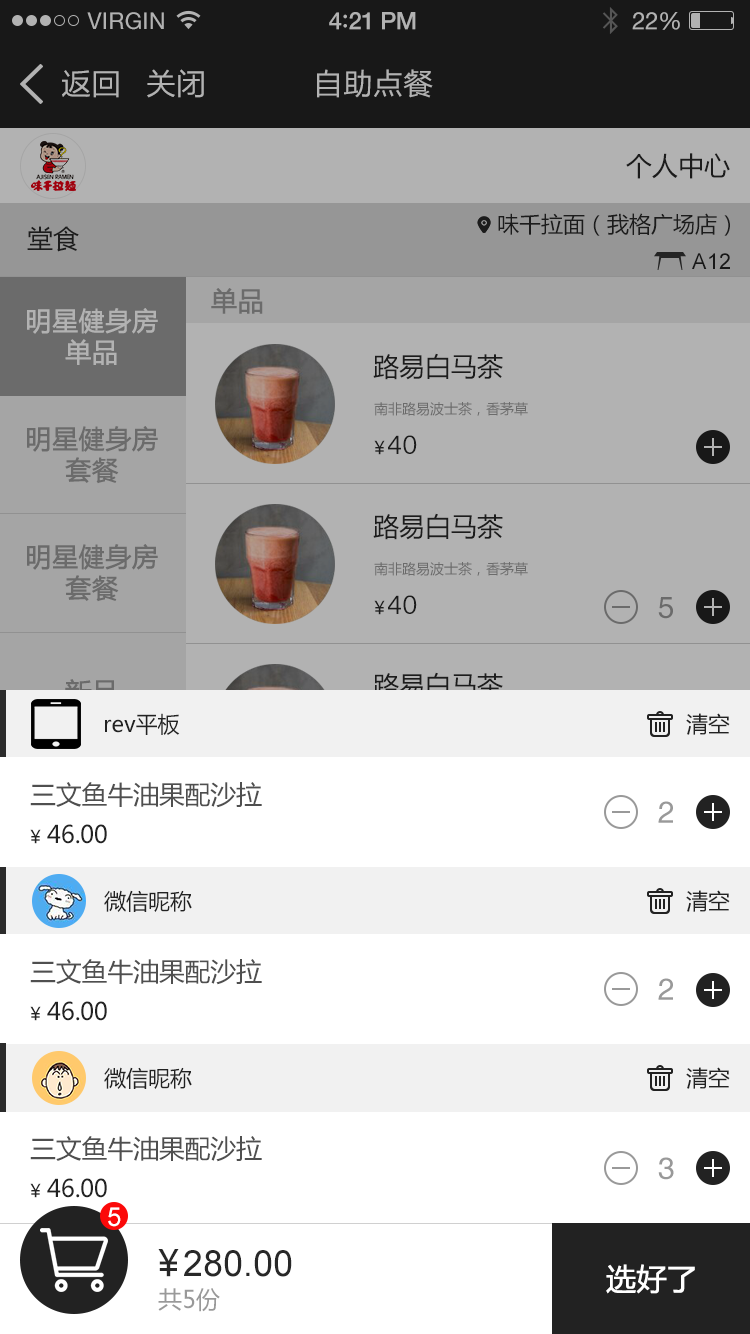
<style>
.page{position:relative;width:750px;height:1334px;background:#ffffff}
.page>*{position:absolute;margin:0}
.t1{font:23px "HelveticaNeue";letter-spacing:0.02em;color:#b2b2b2}
.t2{font:24px "HelveticaNeue-Medium";letter-spacing:-0.02em;color:#b2b2b2}
.t3{font:26px "Avenir-Medium";letter-spacing:-0.02em;color:#b2b2b2}
.t4{font:24px "HelveticaNeue";letter-spacing:-0.02em;color:#b2b2b2}
.t5{font:30px "FZLTHK--GBK1-0";color:#b2b2b2}
.t6{font:26px "MicrosoftYaHei";color:#282828}
.t7{font:22px "MicrosoftYaHei";color:#282828}
.t8{font:22px "ArialMT";color:#222222}
.t9{font:26px "MicrosoftYaHei";color:#6b6b6b;font-weight:bold}
.t10{font:26px "MicrosoftYaHei";color:#b2b2b2;font-weight:bold}
.t11{font:14px "MicrosoftYaHei";color:#6b6b6b}
.t12{font:24px "BanglaSangamMN";color:#282828}
.t13{font:18px "MicrosoftYaHei";letter-spacing:-0.01em;color:#282828}
.t14{font:30px "Helvetica";letter-spacing:-0.01em;color:#6b6b6b}
.t15{font:22px "MicrosoftYaHei";color:#222222}
.t16{font:26px "MicrosoftYaHei";letter-spacing:-0.01em;color:#4f4f4f}
.t17{font:30px "Helvetica";letter-spacing:-0.01em;color:#999999}
.t18{font:18px "MicrosoftYaHei";letter-spacing:-0.01em;color:#222222}
.t19{font:24px "MicrosoftYaHei";letter-spacing:-0.01em;color:#222222}
.t20{font:26px "ArialMT";color:#ffffff}
.t21{font:36px "MicrosoftYaHei";letter-spacing:-0.01em;color:#282828}
.t22{font:36px "ArialMT";color:#282828}
.t23{font:30px "MicrosoftYaHei";letter-spacing:-0.01em;color:#ffffff;font-weight:bold}
.t24{font:24px "MicrosoftYaHei";color:#999999}
</style>
<div class="page">
<p class="t1" style="left:87px;top:12px;width:77px;height:18px">VIRGIN</p>
<p class="t2" style="left:329px;top:12px;width:87px;height:18px">4<span class="t3">:</span>21 PM</p>
<p class="t4" style="left:632px;top:12px;width:48px;height:18px">22%</p>
<p class="t5" style="left:62px;top:70px;width:57px;height:28px">返回</p>
<p class="t5" style="left:147px;top:69px;width:57px;height:29px">关闭</p>
<p class="t5" style="left:317px;top:69px;width:116px;height:29px">自助点餐</p>
<p class="t6" style="left:626px;top:153px;width:104px;height:26px">个人中心</p>
<p class="t7" style="left:498px;top:213px;width:232px;height:23px">味千拉面（我格广场店）</p>
<p class="t6" style="left:27px;top:226px;width:52px;height:26px">堂食</p>
<p class="t8" style="left:692px;top:253px;width:38px;height:16px">A12</p>
<p class="t9" style="left:211px;top:288px;width:52px;height:26px">单品</p>
<p class="t10" style="left:27px;top:308px;width:131px;height:57px;text-align:center">明星健身房<br>单品</p>
<p class="t6" style="left:373px;top:353px;width:130px;height:27px">路易白马茶</p>
<p class="t11" style="left:374px;top:402px;width:154px;height:14px">南非路易波士茶，香茅草</p>
<p class="t9" style="left:27px;top:426px;width:131px;height:58px;text-align:center">明星健身房<br>套餐</p>
<p class="t12" style="left:388px;top:435px;width:29px;height:19px">40</p>
<p class="t13" style="left:374px;top:440px;width:11px;height:15px">￥</p>
<p class="t6" style="left:373px;top:513px;width:130px;height:27px">路易白马茶</p>
<p class="t9" style="left:27px;top:544px;width:131px;height:58px;text-align:center">明星健身房<br>套餐</p>
<p class="t11" style="left:374px;top:562px;width:154px;height:14px">南非路易波士茶，香茅草</p>
<p class="t13" style="left:374px;top:600px;width:11px;height:15px">￥</p>
<p class="t12" style="left:388px;top:595px;width:29px;height:19px">40</p>
<p class="t14" style="left:658px;top:597px;width:15px;height:22px">5</p>
<p class="t6" style="left:373px;top:672px;width:130px;height:27px">路易白马茶</p>
<p class="t15" style="left:105px;top:713px;width:75px;height:22px">rev平板</p>
<p class="t15" style="left:686px;top:713px;width:44px;height:22px">清空</p>
<p class="t16" style="left:30px;top:782px;width:232px;height:26px">三文鱼牛油果配沙拉</p>
<p class="t17" style="left:658px;top:801px;width:15px;height:22px">2</p>
<p class="t18" style="left:30px;top:829px;width:11px;height:15px">￥</p>
<p class="t19" style="left:47px;top:824px;width:60px;height:20px">46.00</p>
<p class="t15" style="left:104px;top:890px;width:88px;height:22px">微信昵称</p>
<p class="t15" style="left:686px;top:890px;width:44px;height:22px">清空</p>
<p class="t16" style="left:30px;top:959px;width:232px;height:26px">三文鱼牛油果配沙拉</p>
<p class="t17" style="left:658px;top:978px;width:15px;height:22px">2</p>
<p class="t19" style="left:47px;top:1001px;width:60px;height:20px">46.00</p>
<p class="t18" style="left:30px;top:1006px;width:11px;height:15px">￥</p>
<p class="t15" style="left:104px;top:1067px;width:88px;height:22px">微信昵称</p>
<p class="t15" style="left:686px;top:1067px;width:44px;height:22px">清空</p>
<p class="t16" style="left:30px;top:1136px;width:232px;height:26px">三文鱼牛油果配沙拉</p>
<p class="t17" style="left:658px;top:1157px;width:16px;height:23px">3</p>
<p class="t19" style="left:47px;top:1178px;width:60px;height:20px">46.00</p>
<p class="t18" style="left:30px;top:1183px;width:11px;height:15px">￥</p>
<p class="t20" style="left:108px;top:1207px;width:13px;height:20px">5</p>
<p class="t21" style="left:158px;top:1249px;width:21px;height:28px">￥</p>
<p class="t22" style="left:184px;top:1250px;width:108px;height:27px">280.00</p>
<p class="t23" style="left:606px;top:1264px;width:89px;height:30px">选好了</p>
<p class="t24" style="left:158px;top:1288px;width:62px;height:24px">共5份</p>
</div>
